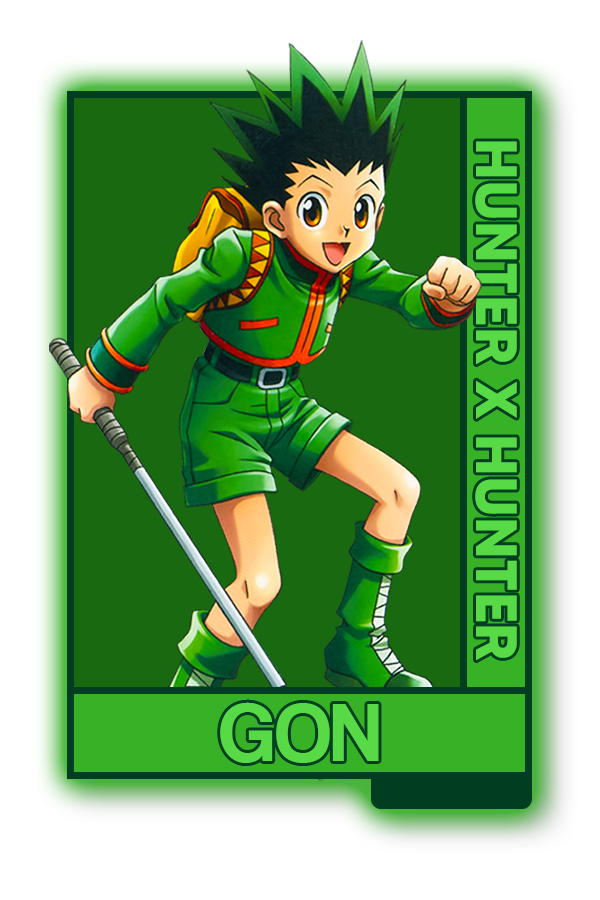
<style>
.page{position:relative;width:600px;height:900px;background:#18690f}
.page>*{position:absolute;margin:0}
.t1{font:58.3px "MADETOMMY-Bold";color:#58d946}
.t2{font:84.2px "CoolveticaRg-Regular";color:#58d946}
</style>
<div class="page">
<p class="t1" style="left:475px;top:141px;width:42px;height:520px;rotate:90deg">HUNTER X HUNTER</p>
<p class="t2" style="left:220px;top:702px;width:159px;height:61px">GON</p>
</div>
